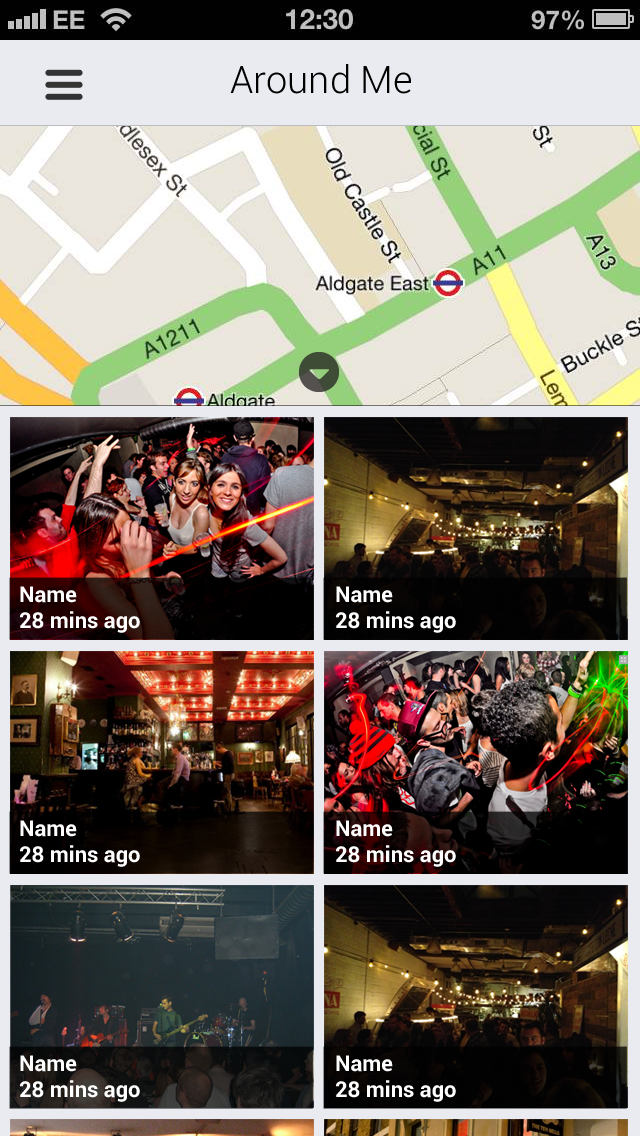
<style>
.page{position:relative;width:640px;height:1136px}
.page>*{position:absolute;margin:0}
.t1{font:38px "Roboto-Light";color:#000000}
.t2{font:22px "Roboto-Bold";color:#ffffff}
</style>
<div class="page">
<p class="t1" style="left:230px;top:64px;width:181px;height:30px">Around Me</p>
<p class="t2" style="left:20px;top:586px;width:120px;height:47px">Name<br>28 mins ago</p>
<p class="t2" style="left:336px;top:586px;width:120px;height:47px">Name<br>28 mins ago</p>
<p class="t2" style="left:20px;top:820px;width:120px;height:47px">Name<br>28 mins ago</p>
<p class="t2" style="left:336px;top:820px;width:120px;height:47px">Name<br>28 mins ago</p>
<p class="t2" style="left:20px;top:1055px;width:120px;height:47px">Name<br>28 mins ago</p>
<p class="t2" style="left:336px;top:1055px;width:120px;height:47px">Name<br>28 mins ago</p>
</div>
